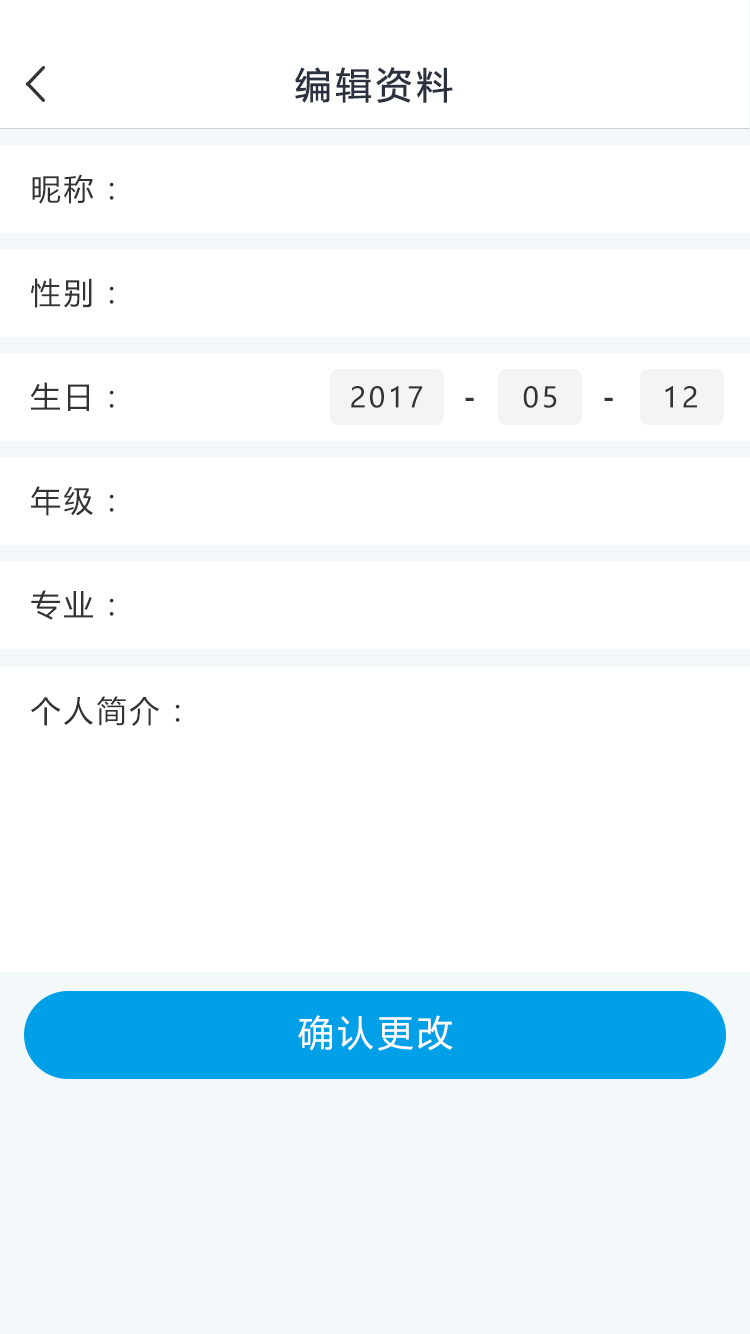
<style>
.page{position:relative;width:750px;height:1334px;background:#ffffff}
.page>*{position:absolute;margin:0}
.t1{font:36px "MicrosoftYaHei";letter-spacing:0.1em;color:#2b313f;font-weight:bold}
.t2{font:30px "MicrosoftYaHei";letter-spacing:0.1em;color:#333333}
.t3{font:28px "MicrosoftYaHei";letter-spacing:0.1em;color:#333333}
.t4{font:28px "MicrosoftYaHei-Bold";letter-spacing:0.1em;color:#333333}
.t5{font:36px "MicrosoftYaHei";letter-spacing:0.1em;color:#ffffff}
</style>
<div class="page">
<p class="t1" style="left:295px;top:67px;width:158px;height:36px">编辑资料</p>
<p class="t2" style="left:32px;top:174px;width:82px;height:30px">昵称：</p>
<p class="t2" style="left:30px;top:278px;width:84px;height:30px">性别：</p>
<p class="t2" style="left:30px;top:382px;width:84px;height:29px">生日：</p>
<p class="t3" style="left:351px;top:386px;width:72px;height:22px">2017</p>
<p class="t3" style="left:523px;top:386px;width:34px;height:22px">05</p>
<p class="t3" style="left:665px;top:386px;width:32px;height:22px">12</p>
<p class="t4" style="left:465px;top:397px;width:9px;height:4px">-</p>
<p class="t4" style="left:604px;top:397px;width:9px;height:4px">-</p>
<p class="t2" style="left:31px;top:486px;width:83px;height:30px">年级：</p>
<p class="t2" style="left:31px;top:590px;width:83px;height:30px">专业：</p>
<p class="t2" style="left:31px;top:696px;width:149px;height:30px">个人简介：</p>
<p class="t5" style="left:298px;top:1015px;width:155px;height:36px">确认更改</p>
</div>
